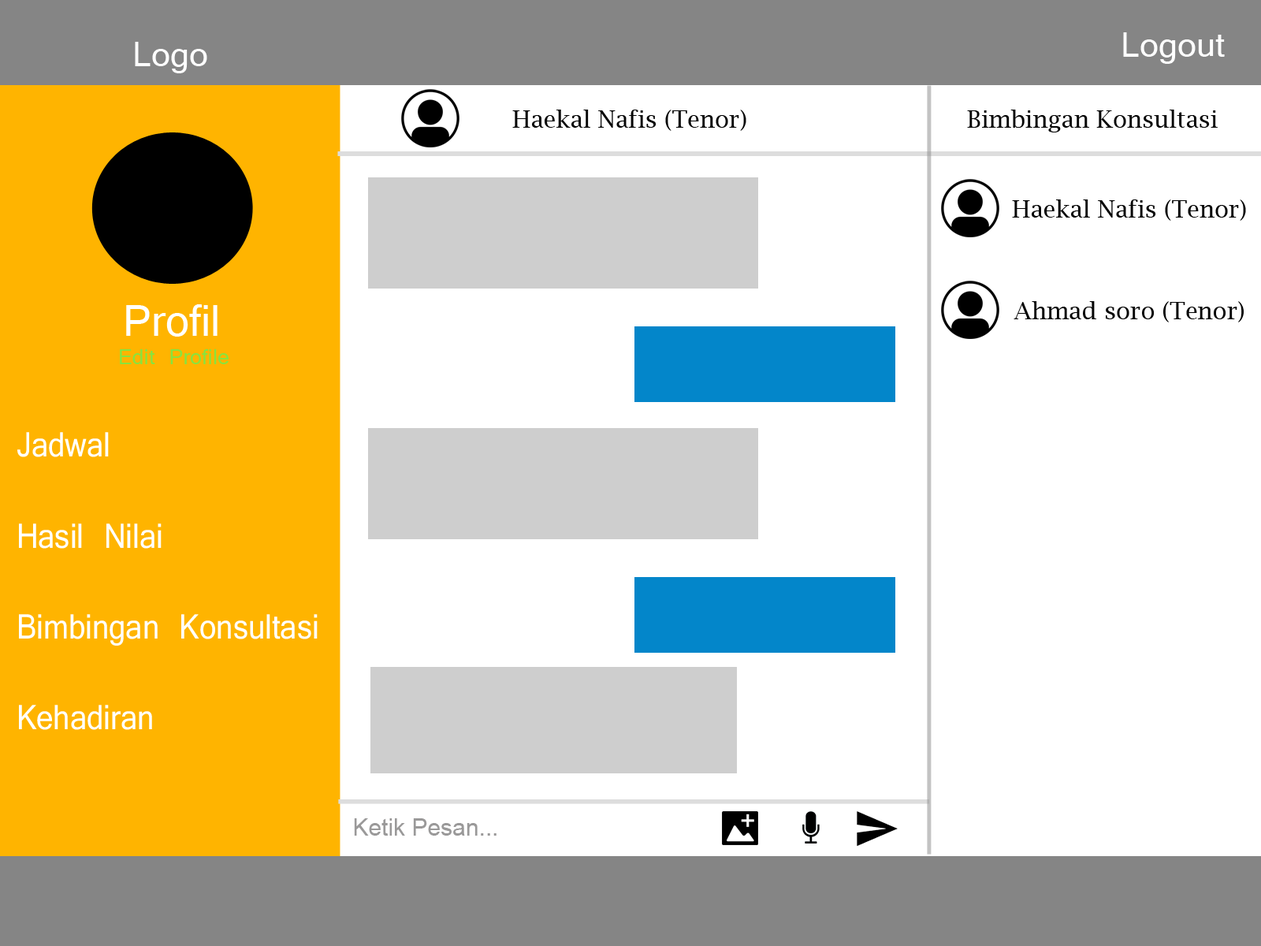
<style>
.page{position:relative;width:1261px;height:946px;background:#ffffff}
.page>*{position:absolute;margin:0}
.t1{font:37.8px "Vrinda";color:#fefefe}
.t2{font:23.6px "LucidaBright";color:#040404}
.t3{font:47.3px "Vrinda";color:#ffffff}
.t4{font:23.6px "Vrinda";color:#88e33e}
.t5{font:37.8px "Vrinda";color:#ffffff;scale:0.89 1}
.t6{font:23.6px "ArialMT";color:#9a9999}
</style>
<div class="page">
<p class="t1" style="left:135px;top:42px;width:72px;height:31px">Logo</p>
<p class="t1" style="left:1123px;top:32px;width:102px;height:32px">Logout</p>
<p class="t2" style="left:512px;top:110px;width:234px;height:21px">Haekal Nafis (Tenor)</p>
<p class="t2" style="left:967px;top:110px;width:251px;height:22px">Bimbingan Konsultasi</p>
<p class="t2" style="left:1012px;top:199px;width:234px;height:22px">Haekal Nafis (Tenor)</p>
<p class="t3" style="left:126px;top:304px;width:92px;height:33px">Profil</p>
<p class="t2" style="left:1013px;top:301px;width:231px;height:21px">Ahmad soro (Tenor)</p>
<p class="t4" style="left:120px;top:349px;width:109px;height:15px">Edit Profile</p>
<p class="t5" style="left:17px;top:432px;width:301px;height:298px">Jadwal<br><br>Hasil Nilai<br><br>Bimbingan Konsultasi<br><br>Kehadiran</p>
<p class="t6" style="left:354px;top:818px;width:142px;height:17px">Ketik Pesan...</p>
</div>
